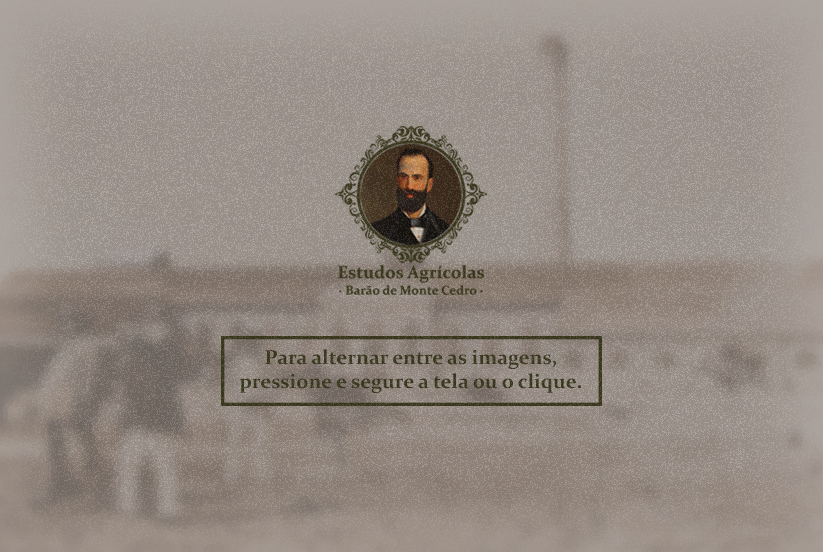
<style>
.page{position:relative;width:823px;height:552px}
.page>*{position:absolute;margin:0}
.t1{font:20.2px "Constantia-Bold";color:#3a381d}
</style>
<div class="page">
<p class="t1" style="left:239px;top:349px;width:342px;height:44px;text-align:center">Para alternar entre as imagens,<br>pressione e segure a tela ou o clique.</p>
</div>
